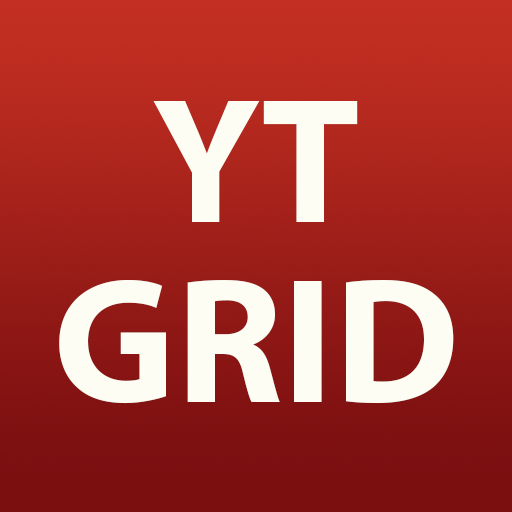
<style>
.page{position:relative;width:512px;height:512px}
.page>*{position:absolute;margin:0}
.t1{font:180px/180px "MyriadPro-Bold";color:#fdfdf4}
</style>
<div class="page">
<p class="t1" style="left:59px;top:101px;width:395px;height:303px;text-align:center">YT<br>GRID</p>
</div>
